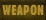
<style>
.page{position:relative;width:46px;height:20px}
.page>*{position:absolute;margin:0}
.t1{font:14px "Gothic821CondensedBT-Regular";letter-spacing:0.06em;color:#b08e32;scale:0.9 1}
</style>
<div class="page">
<p class="t1" style="left:2px;top:4px;width:42px;height:11px">WEAPON</p>
</div>
